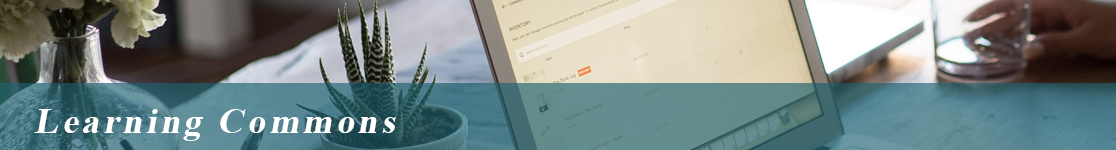
<style>
.page{position:relative;width:1116px;height:150px}
.page>*{position:absolute;margin:0}
.t1{font:36px "TimesNewRomanPS-BoldMT";letter-spacing:0.1em;color:#ffffff;font-style:italic}
</style>
<div class="page">
<p class="t1" style="left:34px;top:109px;width:362px;height:32px">Learning Commons</p>
</div>
